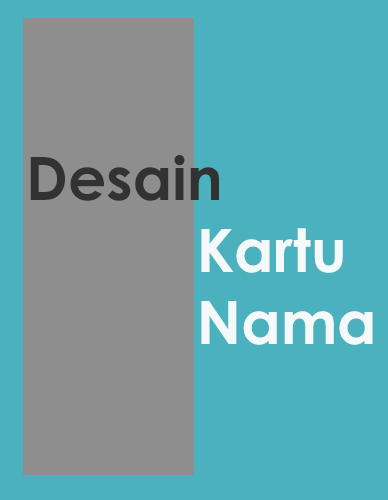
<style>
.page{position:relative;width:388px;height:500px;background:#4bb1be}
.page>*{position:absolute;margin:0}
.t1{font:60px "CenturyGothic-Bold";color:#333232}
.t2{font:60px "CenturyGothic-Bold";color:#f4f9fa}
</style>
<div class="page">
<p class="t1" style="left:30px;top:155px;width:189px;height:46px">Desain</p>
<p class="t2" style="left:201px;top:228px;width:172px;height:117px">Kartu<br>Nama</p>
</div>
